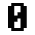
<style>
.page{position:relative;width:35px;height:35px;background:#ffffff}
.page>*{position:absolute;margin:0}
.t1{font:33.3px "8bitoperatorRegular";color:#030303}
</style>
<div class="page">
<p class="t1" style="left:8px;top:3px;width:19px;height:28px">0</p>
</div>
